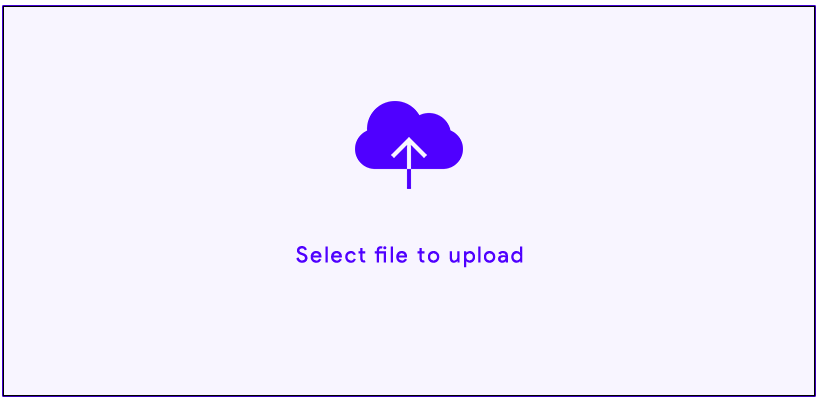
<style>
.page{position:relative;width:819px;height:400px;background:#f8f5ff}
.page>*{position:absolute;margin:0}
.t1{font:22px "ProductSans-Regular";letter-spacing:0.1em;color:#4f00ff}
</style>
<div class="page">
<p class="t1" style="left:296px;top:246px;width:227px;height:22px">Select file to upload</p>
</div>
